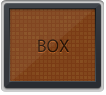
<style>
.page{position:relative;width:106px;height:95px}
.page>*{position:absolute;margin:0}
.t1{font:18px "MyriadPro-Regular";color:#2b180a}
</style>
<div class="page">
<p class="t1" style="left:38px;top:39px;width:31px;height:14px">BOX</p>
</div>
